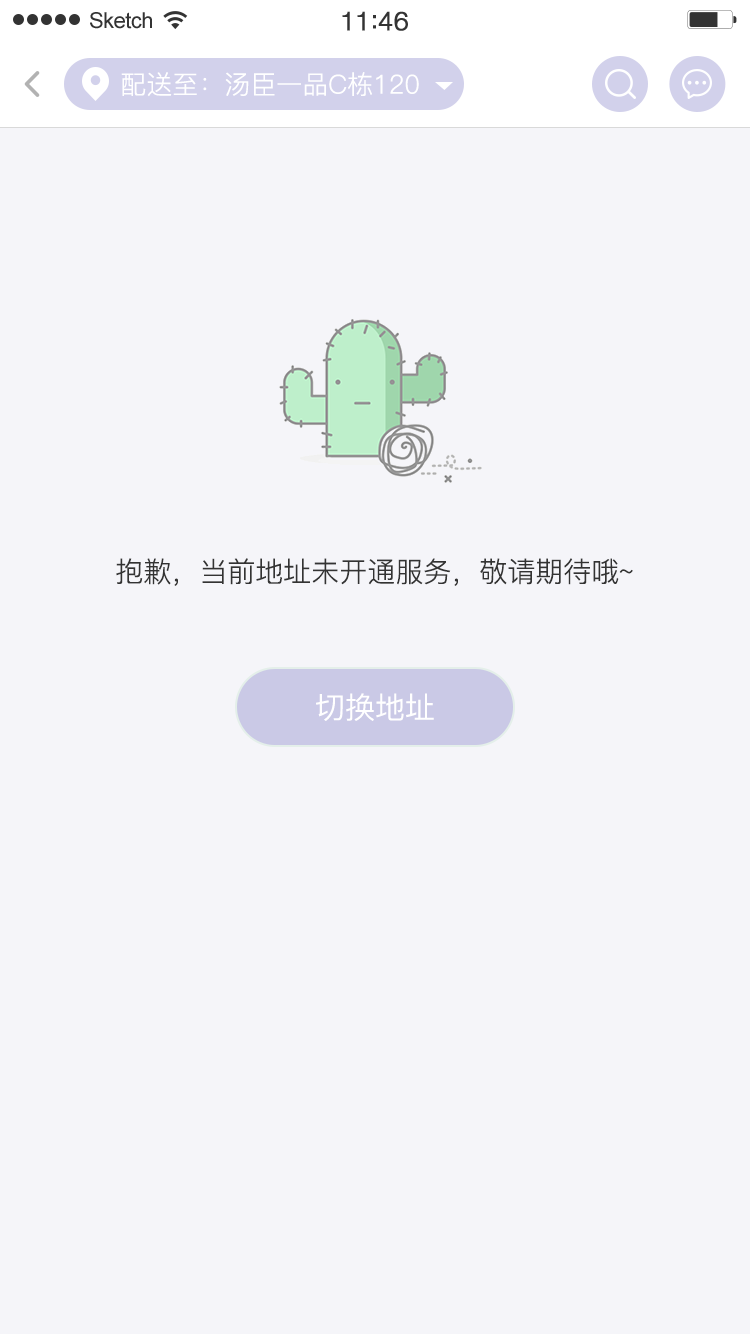
<style>
.page{position:relative;width:750px;height:1334px;background:#f5f5f9}
.page>*{position:absolute;margin:0}
.t1{font:22px "ArialMT";letter-spacing:-0.025em;color:#333333}
.t2{font:26px "HelveticaNeueLTStd-Lt";color:#333333;font-weight:bold}
.t3{font:26px "PingFang-SC-Regular";color:#ffffff}
.t4{font:28px "PingFang-SC-Regular";color:#333333}
.t5{font:30px "PingFang-SC-Medium";color:#ffffff}
</style>
<div class="page">
<p class="t1" style="left:90px;top:12px;width:62px;height:17px">Sketch</p>
<p class="t2" style="left:342px;top:11px;width:66px;height:20px">11:46</p>
<p class="t3" style="left:121px;top:72px;width:298px;height:25px">配送至：汤臣一品C栋120</p>
<p class="t4" style="left:116px;top:558px;width:517px;height:28px">抱歉，当前地址未开通服务，敬请期待哦~</p>
<p class="t5" style="left:316px;top:693px;width:118px;height:28px">切换地址</p>
</div>
